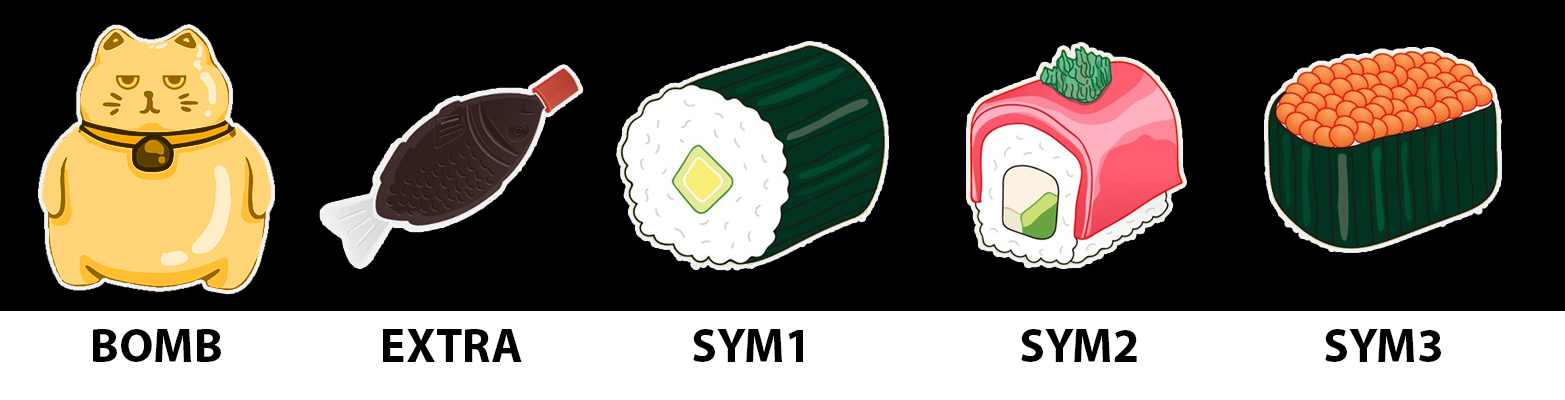
<style>
.page{position:relative;width:1565px;height:400px;background:#000000}
.page>*{position:absolute;margin:0}
.t1{font:48px "MyriadPro-Bold";color:#000000}
</style>
<div class="page">
<p class="t1" style="left:93px;top:329px;width:128px;height:33px">BOMB</p>
<p class="t1" style="left:383px;top:329px;width:139px;height:33px">EXTRA</p>
<p class="t1" style="left:693px;top:329px;width:110px;height:33px">SYM1</p>
<p class="t1" style="left:1021px;top:329px;width:116px;height:33px">SYM2</p>
<p class="t1" style="left:1325px;top:329px;width:116px;height:33px">SYM3</p>
</div>
